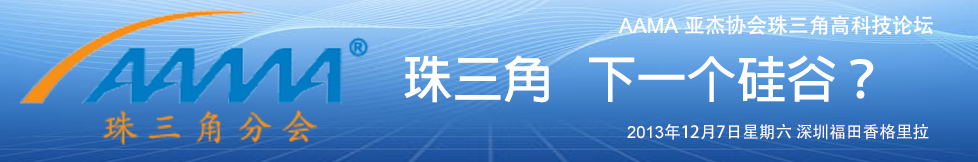
<style>
.page{position:relative;width:978px;height:162px}
.page>*{position:absolute;margin:0}
.t1{font:20.8px "AdobeHeitiStd-Regular";color:#fcfcfd}
.t2{font:20.8px "ArialMT";color:#fcfcfd}
.t3{font:50px "AdobeFanHeitiStd-Bold";color:#fefefe}
.t4{font:16.7px "AdobeHeitiStd-Regular";color:#fdfbfb}
.t5{font:16.7px "ArialMT";color:#fdfbfb}
</style>
<div class="page">
<p class="t1" style="left:618px;top:15px;width:315px;height:20px"><span class="t2">AAMA </span>亚杰协会珠三角高科技论坛</p>
<p class="t3" style="left:404px;top:55px;width:470px;height:48px">珠三角   下一个硅谷？</p>
<p class="t4" style="left:627px;top:124px;width:302px;height:16px"><span class="t5">2013</span>年12月7日星期六 深圳福田香格里拉</p>
</div>
